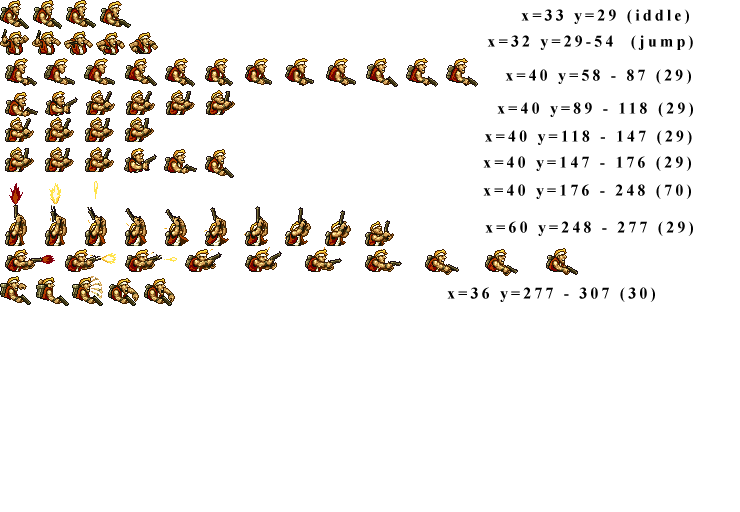
<style>
.page{position:relative;width:740px;height:512px;background:#ffffff}
.page>*{position:absolute;margin:0}
.t1{font:15.9px "TimesNewRomanPS-BoldMT";letter-spacing:0.2em;color:#000000}
</style>
<div class="page">
<p class="t1" style="left:521px;top:9px;width:168px;height:15px">x=33 y=29 (iddle)</p>
<p class="t1" style="left:487px;top:35px;width:206px;height:15px">x=32 y=29-54  (jump)</p>
<p class="t1" style="left:505px;top:69px;width:186px;height:15px">x=40 y=58 - 87 (29)</p>
<p class="t1" style="left:497px;top:102px;width:196px;height:15px">x=40 y=89 - 118 (29)</p>
<p class="t1" style="left:485px;top:130px;width:207px;height:15px">x=40 y=118 - 147 (29)</p>
<p class="t1" style="left:483px;top:156px;width:208px;height:15px">x=40 y=147 - 176 (29)</p>
<p class="t1" style="left:483px;top:184px;width:208px;height:15px">x=40 y=176 - 248 (70)</p>
<p class="t1" style="left:485px;top:221px;width:208px;height:15px">x=60 y=248 - 277 (29)</p>
<p class="t1" style="left:447px;top:287px;width:208px;height:15px">x=36 y=277 - 307 (30)</p>
</div>
